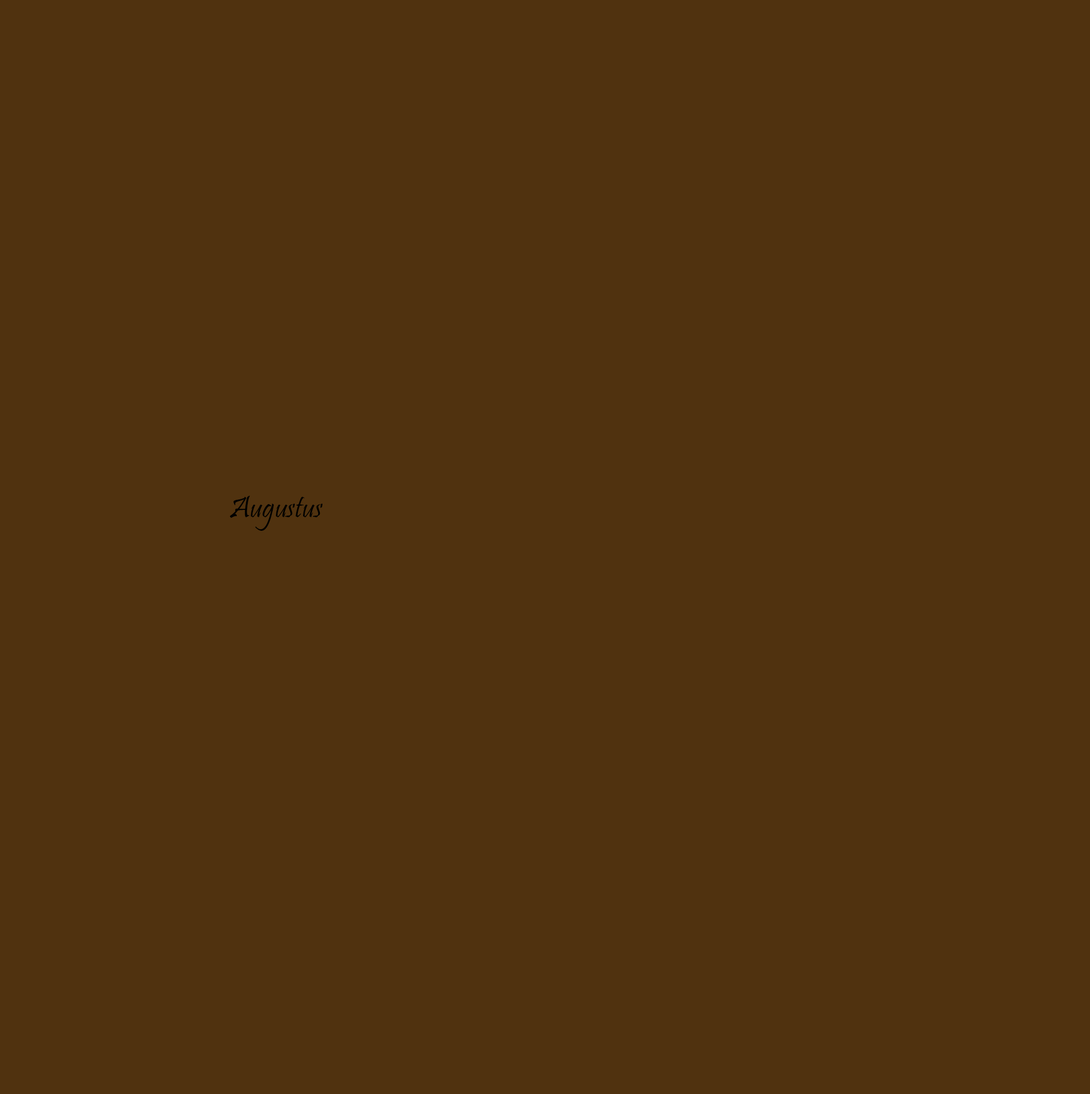
<style>
.page{position:relative;width:1090px;height:1094px;background:#50320f}
.page>*{position:absolute;margin:0}
.t1{font:31.5px "Pristina-Regular";color:#000000}
</style>
<div class="page">
<p class="t1" style="left:230px;top:496px;width:93px;height:35px">Augustus</p>
</div>
